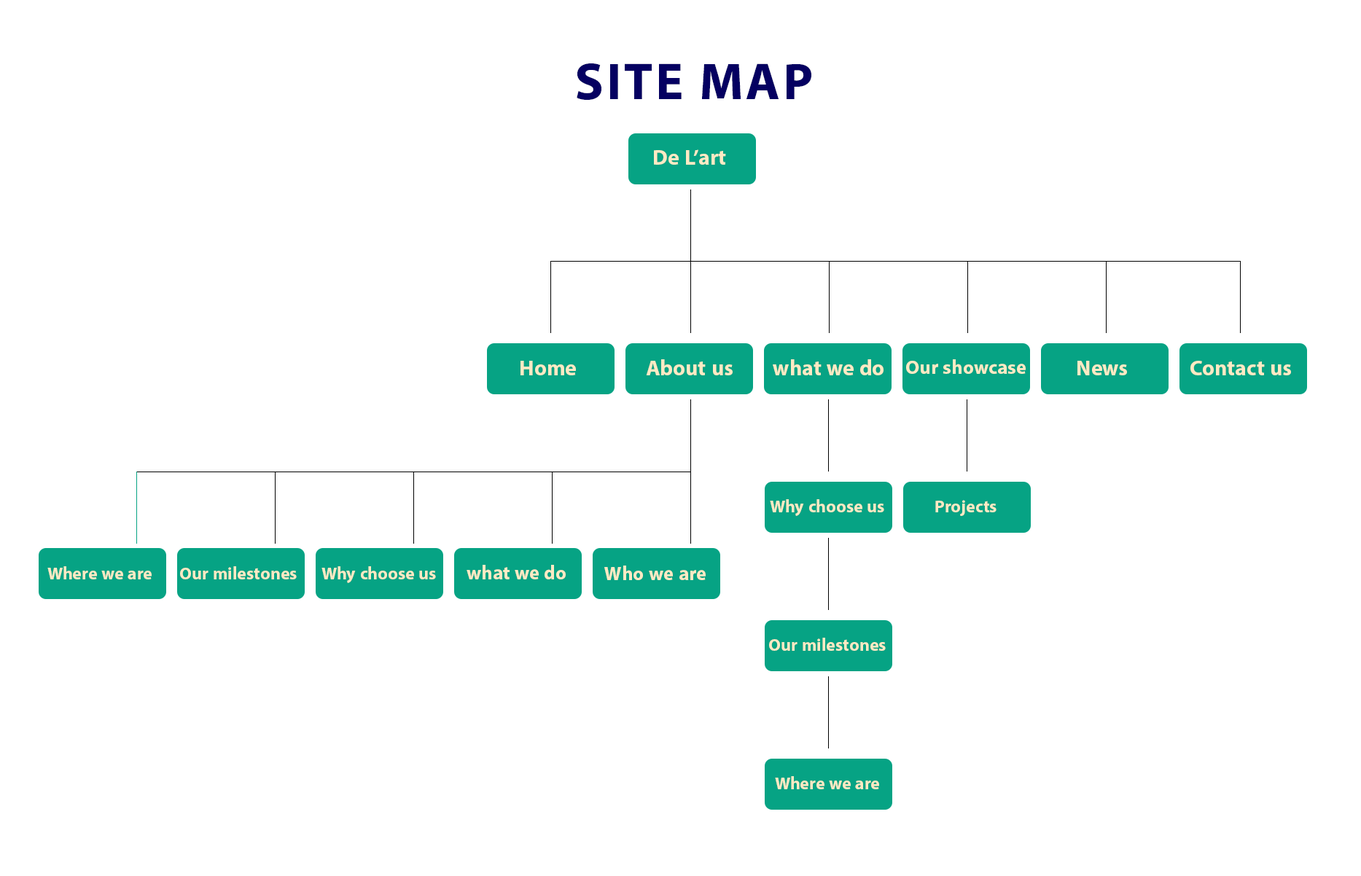
<style>
.page{position:relative;width:1361px;height:876px;background:#ffffff}
.page>*{position:absolute;margin:0}
.t1{font:72.9px "MyriadArabic-Bold";letter-spacing:0.04em;color:#050061}
.t2{font:30.4px "MyriadArabic-Bold";color:#feeac4}
.t3{font:27.3px "MyriadArabic-Bold";color:#feeac4}
.t4{font:24.3px "MyriadArabic-Bold";color:#feeac4}
</style>
<div class="page">
<p class="t1" style="left:577px;top:63px;width:234px;height:37px">SITE MAP</p>
<p class="t2" style="left:654px;top:149px;width:72px;height:16px">De L’art</p>
<p class="t2" style="left:520px;top:361px;width:56px;height:14px">Home</p>
<p class="t2" style="left:646px;top:359px;width:87px;height:16px">About us</p>
<p class="t2" style="left:773px;top:359px;width:110px;height:16px">what we do</p>
<p class="t3" style="left:906px;top:359px;width:120px;height:15px">Our showcase</p>
<p class="t2" style="left:1077px;top:361px;width:50px;height:14px">News</p>
<p class="t2" style="left:1190px;top:361px;width:101px;height:14px">Contact us</p>
<p class="t4" style="left:770px;top:499px;width:114px;height:17px">Why choose us</p>
<p class="t4" style="left:935px;top:500px;width:61px;height:16px">Projects</p>
<p class="t4" style="left:47px;top:566px;width:105px;height:14px">Where we are</p>
<p class="t4" style="left:180px;top:566px;width:117px;height:14px">Our milestones</p>
<p class="t4" style="left:321px;top:566px;width:115px;height:17px">Why choose us</p>
<p class="t3" style="left:467px;top:565px;width:99px;height:15px">what we do</p>
<p class="t3" style="left:604px;top:566px;width:102px;height:14px">Who we are</p>
<p class="t4" style="left:769px;top:638px;width:117px;height:13px">Our milestones</p>
<p class="t4" style="left:775px;top:776px;width:104px;height:13px">Where we are</p>
</div>
